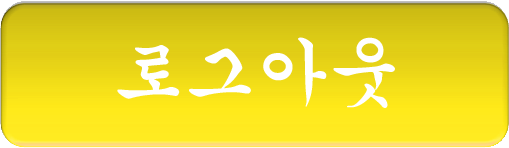
<style>
.page{position:relative;width:509px;height:148px}
.page>*{position:absolute;margin:0}
.t1{font:72px "Gungsuh";color:#ffffff}
</style>
<div class="page">
<p class="t1" style="left:117px;top:37px;width:278px;height:71px">로그아웃</p>
</div>
